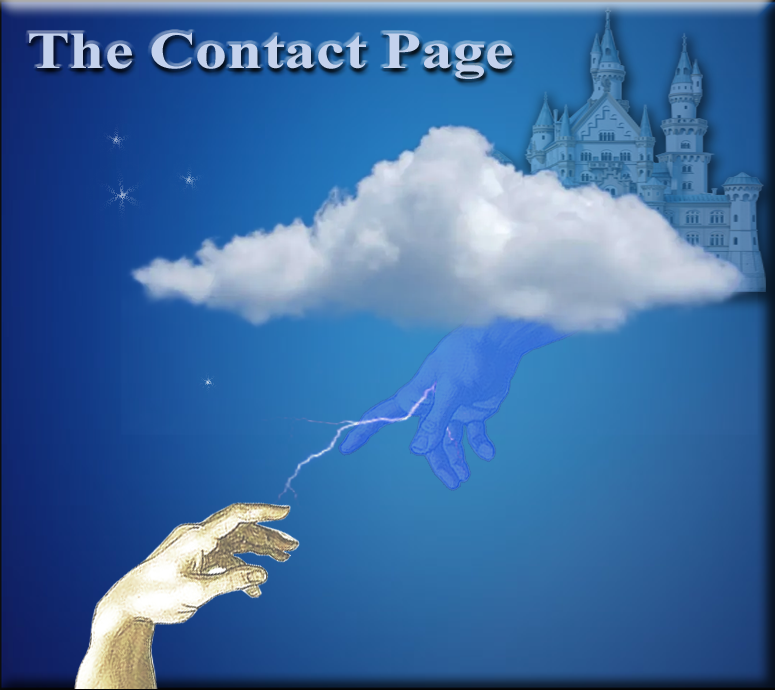
<style>
.page{position:relative;width:775px;height:690px}
.page>*{position:absolute;margin:0}
.t1{font:52px "TimesNewRomanPS-BoldMT";color:#c4d2ed;scale:1.23 1}
</style>
<div class="page">
<p class="t1" style="left:29px;top:32px;width:483px;height:47px">The Contact Page</p>
</div>
